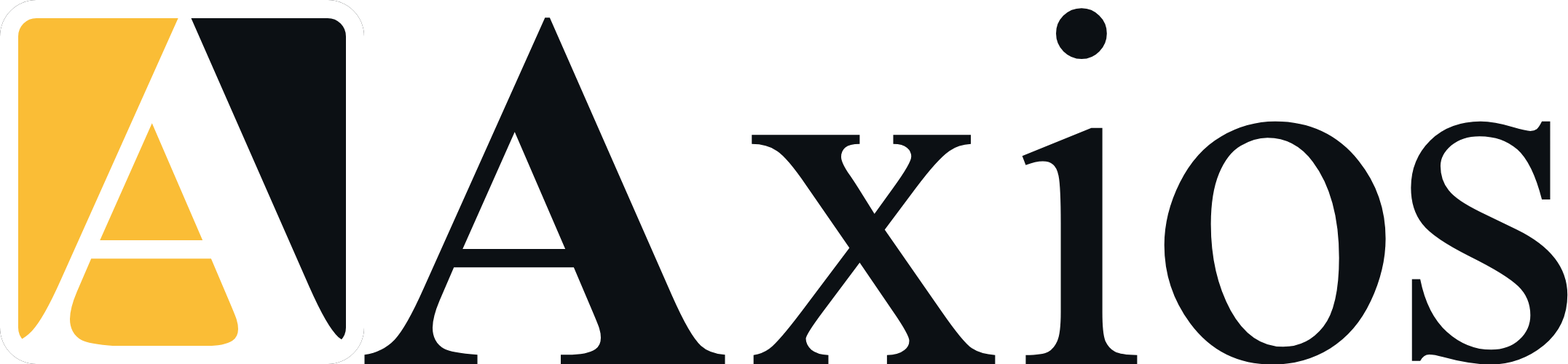
<style>
.page{position:relative;width:1568px;height:364px;background:#ffffff}
.page>*{position:absolute;margin:0}
.t1{font:512.7px "TimesNewRomanPS-BoldMT";color:#ffffff}
.t2{font:512.7px "TimesNewRomanPS-BoldMT";color:#0c1014}
.t3{font:512.7px "TimesNewRomanPSMT";color:#0c1014}
</style>
<div class="page">
<p class="t1" style="left:1px;top:9px;width:362px;height:346px">A</p>
<p class="t2" style="left:364px;top:17px;width:361px;height:348px">A</p>
<p class="t3" style="left:1022px;top:8px;width:116px;height:357px">i</p>
<p class="t3" style="left:1164px;top:121px;width:222px;height:244px">o</p>
<p class="t3" style="left:1411px;top:121px;width:157px;height:244px">s</p>
<p class="t3" style="left:752px;top:135px;width:244px;height:230px">x</p>
</div>
